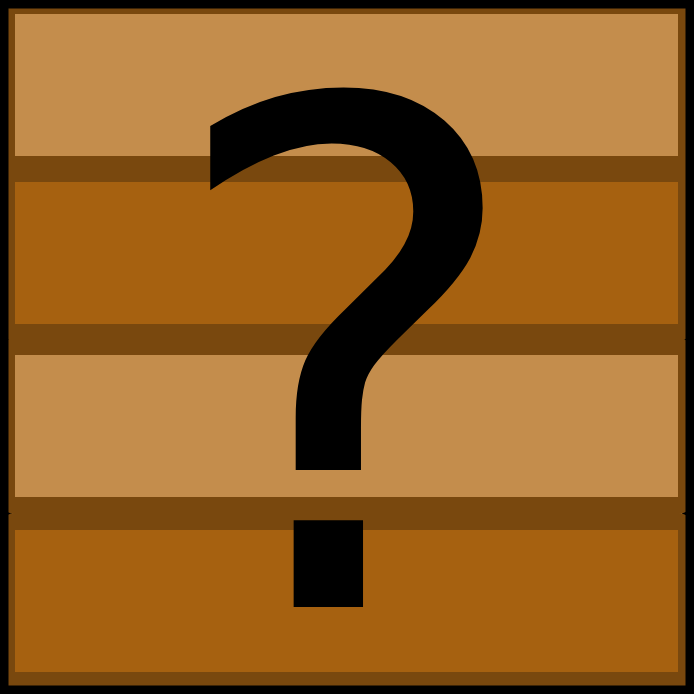
<style>
.page{position:relative;width:694px;height:694px;background:#a66110}
.page>*{position:absolute;margin:0}
.t1{font:700px "DejaVuSans";color:#000000}
</style>
<div class="page">
<p class="t1" style="left:210px;top:87px;width:273px;height:520px">?</p>
</div>
